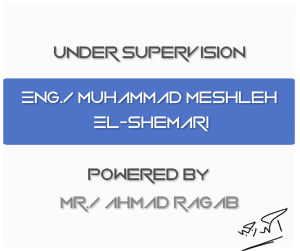
<style>
.page{position:relative;width:300px;height:251px;background:#fbfbfb}
.page>*{position:absolute;margin:0}
.t1{font:16.7px "VerminVibes2";color:#9a9a98}
</style>
<div class="page">
<p class="t1" style="left:53px;top:46px;width:193px;height:16px">Under Supervision</p>
<p class="t1" style="left:88px;top:168px;width:121px;height:16px">Powered by</p>
<p class="t1" style="left:60px;top:196px;width:178px;height:16px">MR./ Ahmad Ragab</p>
</div>
